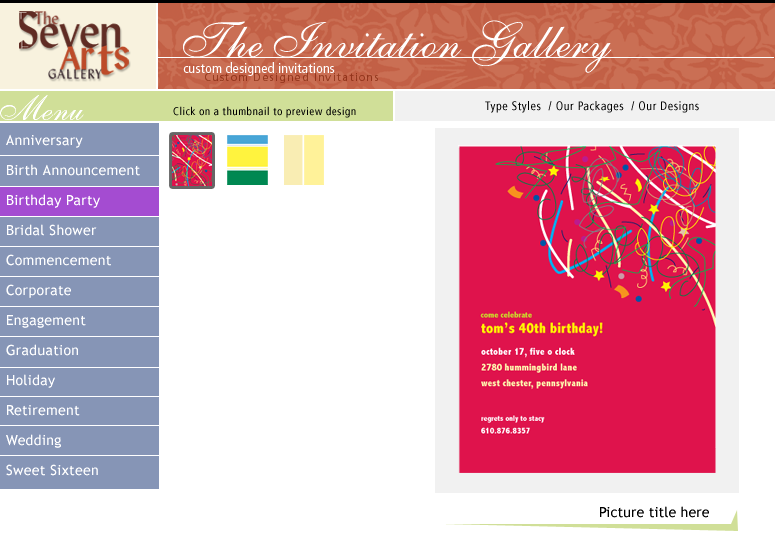
<style>
.page{position:relative;width:775px;height:550px;background:#ffffff}
.page>*{position:absolute;margin:0}
.t1{font:50px "Shelley-AllegroScript";letter-spacing:0.01em;color:#ffffff}
.t2{font:14px "Frutiger-Cn";letter-spacing:0.01em;color:#ffffff}
.t3{font:11px "Frutiger-Roman";letter-spacing:0.1em;color:#963a1f}
.t4{font:36px "Shelley-AllegroScript";letter-spacing:0.01em;color:#ffffff}
.t5{font:12px "Frutiger-Cn";letter-spacing:0.05em;color:#000000}
.t6{font:11px "Frutiger-Cn";letter-spacing:0.05em;color:#000000}
.t7{font:14px/30px "TrebuchetMS";letter-spacing:0.025em;color:#ffffff}
.t8{font:14px "TrebuchetMS";letter-spacing:0.01em;color:#000000}
</style>
<div class="page">
<p class="t1" style="left:183px;top:20px;width:429px;height:53px">The Invitation Gallery</p>
<p class="t2" style="left:183px;top:62px;width:152px;height:14px">custom designed invitations</p>
<p class="t3" style="left:205px;top:72px;width:173px;height:11px">Custom Designed Invitations</p>
<p class="t4" style="left:0px;top:95px;width:84px;height:25px">Menu</p>
<p class="t5" style="left:485px;top:101px;width:214px;height:12px">Type Styles  / Our Packages  / Our Designs</p>
<p class="t6" style="left:173px;top:106px;width:183px;height:12px">Click on a thumbnail to preview design</p>
<p class="t7" style="left:6px;top:134px;width:134px;height:342px">Anniversary<br>Birth Announcement<br>Birthday Party<br>Bridal Shower<br>Commencement<br>Corporate<br>Engagement<br>Graduation<br>Holiday<br>Retirement<br>Wedding<br>Sweet Sixteen</p>
<p class="t8" style="left:600px;top:506px;width:109px;height:12px">Picture title here</p>
</div>
